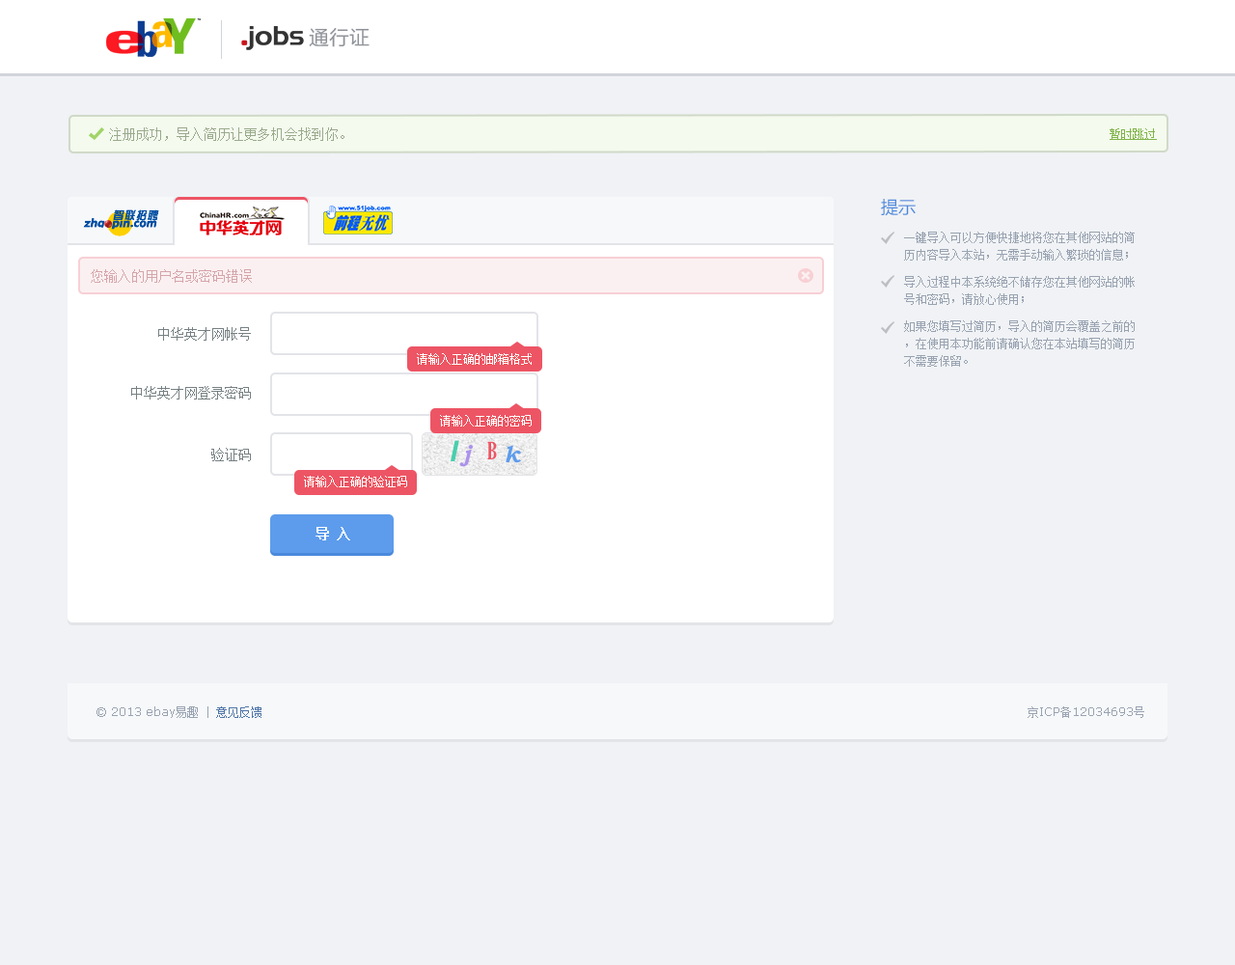
<style>
.page{position:relative;width:1235px;height:965px;background:#f0f2f5}
.page>*{position:absolute;margin:0}
.t1{font:20.3px "FZLTHJW--GB1-0";color:#8f9399}
.t2{font:13.5px "SimSun";color:#9aaa8c}
.t3{font:11.6px "SimSun";color:#81b449;text-decoration:underline}
.t4{font:17.4px "MicrosoftYaHei";color:#4b89dc}
.t5{font:11.6px/17.4px "SimSun";color:#99a3b1}
.t6{font:13.5px "SimSun";color:#d5a5aa}
.t7{font:13.5px "SimSun";color:#768082}
.t8{font:11.6px "SimSun";color:#ffffff}
.t9{font:29px "Arial-BoldItalicMT";color:#48cfad}
.t10{font:23.2px "BookmanOldStyle-BoldItalic";color:#ac92ec}
.t11{font:23.2px "GloucesterMT-ExtraCondensed";color:#ed5565}
.t12{font:23.2px "BookmanOldStyle-BoldItalic";color:#5d9cec}
.t13{font:13.5px "SimSun";color:#ffffff;text-transform:uppercase;font-weight:bold}
.t14{font:11.6px "Verdana";color:#99a3b1}
.t15{font:11.6px "SimSun";color:#99a3b1}
.t16{font:11.6px "SimSun";color:#5076a8}
</style>
<div class="page">
<p class="t1" style="left:309px;top:28px;width:61px;height:19px">通行证</p>
<p class="t2" style="left:109px;top:127px;width:236px;height:14px">注册成功，导入简历让更多机会找到你。</p>
<p class="t3" style="left:1110px;top:128px;width:47px;height:12px">暂时跳过</p>
<p class="t4" style="left:881px;top:199px;width:35px;height:17px">提示</p>
<p class="t5" style="left:904px;top:232px;width:231px;height:135px">一键导入可以方便快捷地将您在其他网站的简历内容导入本站，无需手动输入繁琐的信息；<br>导入过程中本系统绝不储存您在其他网站的帐号和密码，请放心使用；<br>如果您填写过简历，导入的简历会覆盖之前的，在使用本功能前请确认您在本站填写的简历不需要保留。</p>
<p class="t6" style="left:91px;top:269px;width:161px;height:14px">您输入的用户名或密码错误</p>
<p class="t7" style="left:158px;top:327px;width:93px;height:14px">中华英才网帐号</p>
<p class="t8" style="left:417px;top:353px;width:115px;height:12px">请输入正确的邮箱格式</p>
<p class="t7" style="left:131px;top:386px;width:120px;height:14px">中华英才网登录密码</p>
<p class="t8" style="left:440px;top:415px;width:92px;height:12px">请输入正确的密码</p>
<p class="t7" style="left:211px;top:448px;width:40px;height:13px">验证码</p>
<p class="t9" style="left:451px;top:440px;width:8px;height:21px">I</p>
<p class="t10" style="left:459px;top:445px;width:14px;height:22px">j</p>
<p class="t11" style="left:487px;top:441px;width:10px;height:18px">B</p>
<p class="t12" style="left:506px;top:445px;width:15px;height:18px">k</p>
<p class="t8" style="left:304px;top:476px;width:103px;height:11px">请输入正确的验证码</p>
<p class="t13" style="left:316px;top:527px;width:34px;height:14px">导 入</p>
<p class="t14" style="left:97px;top:707px;width:165px;height:11px">© 2013 ebay<span class="t15">易趣</span><span class="t15"> | </span><span class="t16">意见反馈</span></p>
<p class="t14" style="left:1028px;top:707px;width:117px;height:11px"><span class="t15">京</span>ICP<span class="t15">备</span>12034693<span class="t15">号</span></p>
</div>
